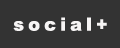
<style>
.page{position:relative;width:120px;height:48px;background:#333333}
.page>*{position:absolute;margin:0}
.t1{font:18px "Arial-Black";letter-spacing:0.22em;color:#f7f5f5}
</style>
<div class="page">
<p class="t1" style="left:13px;top:17px;width:94px;height:14px">social+</p>
</div>
